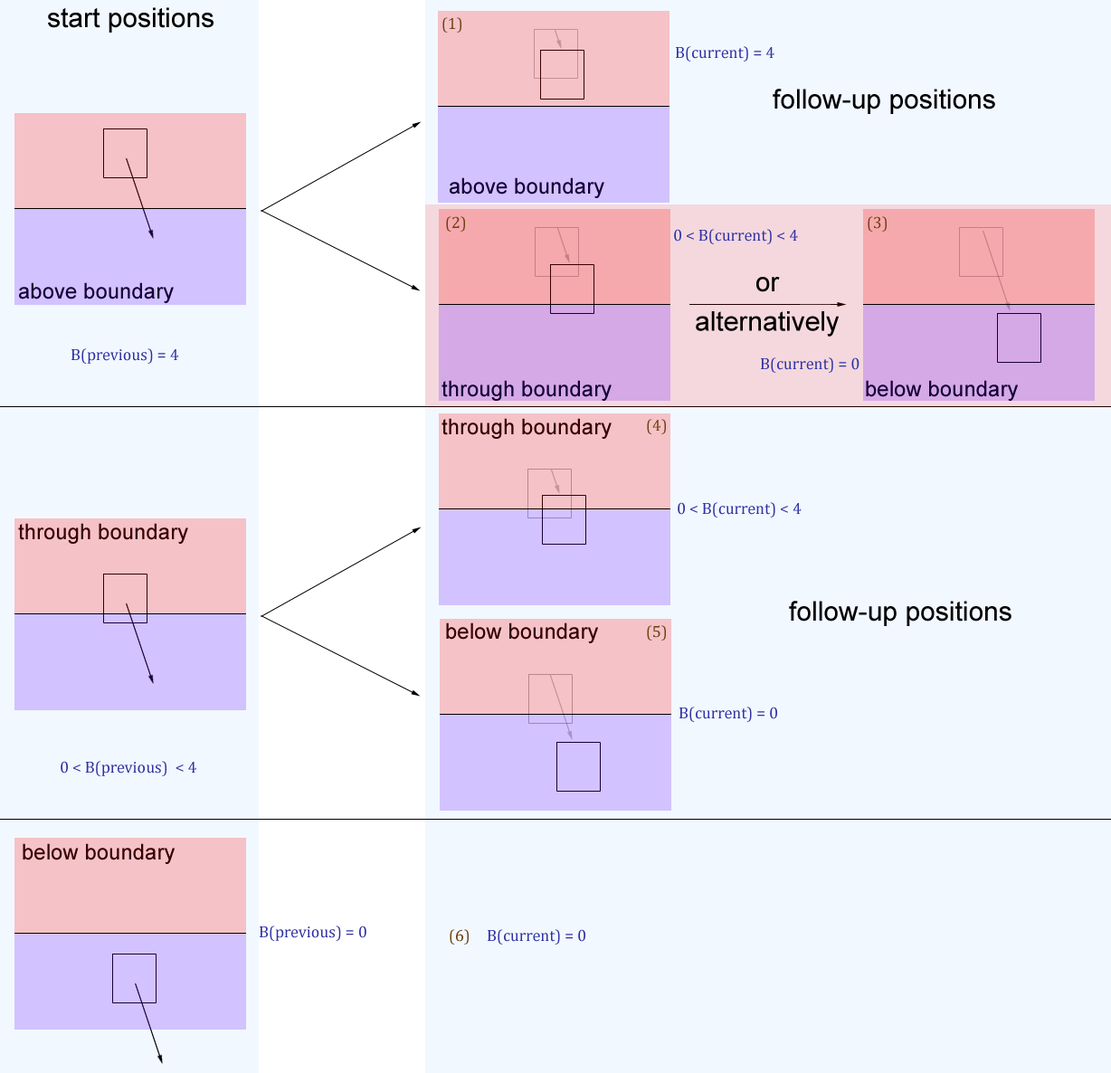
<style>
.page{position:relative;width:1111px;height:1073px;background:#f2f8ff}
.page>*{position:absolute;margin:0}
.t1{font:27.1px "ArialMT";color:#000000}
.t2{font:16.3px "Cambria";color:#6d4111}
.t3{font:16.3px "Cambria";color:#2f32a3}
.t4{font:21.7px "ArialMT";color:#160038}
.t5{font:27.1px/19.7px "ArialMT";color:#000000}
.t6{font:21.7px "ArialMT";color:#380000}
</style>
<div class="page">
<p class="t1" style="left:48px;top:7px;width:166px;height:26px">start positions</p>
<p class="t2" style="left:442px;top:17px;width:19px;height:16px">(1)</p>
<p class="t3" style="left:676px;top:46px;width:99px;height:16px">B(current) = 4</p>
<p class="t1" style="left:773px;top:89px;width:222px;height:25px">follow-up positions</p>
<p class="t4" style="left:450px;top:177px;width:154px;height:21px">above boundary</p>
<p class="t2" style="left:446px;top:216px;width:19px;height:16px">(2)</p>
<p class="t2" style="left:868px;top:216px;width:19px;height:16px">(3)</p>
<p class="t3" style="left:674px;top:229px;width:124px;height:15px">0 &lt; B(current) &lt; 4</p>
<p class="t5" style="left:696px;top:277px;width:143px;height:60px;text-align:center">or<br><br>alternatively</p>
<p class="t4" style="left:19px;top:282px;width:155px;height:21px">above boundary</p>
<p class="t3" style="left:71px;top:348px;width:107px;height:16px">B(previous) = 4</p>
<p class="t3" style="left:761px;top:357px;width:99px;height:16px">B(current) = 0</p>
<p class="t4" style="left:442px;top:380px;width:170px;height:21px">through boundary</p>
<p class="t4" style="left:866px;top:380px;width:152px;height:21px">below boundary</p>
<p class="t6" style="left:442px;top:418px;width:170px;height:21px">through boundary</p>
<p class="t2" style="left:647px;top:419px;width:19px;height:15px">(4)</p>
<p class="t3" style="left:678px;top:502px;width:124px;height:16px">0 &lt; B(current) &lt; 4</p>
<p class="t6" style="left:18px;top:523px;width:170px;height:21px">through boundary</p>
<p class="t1" style="left:789px;top:601px;width:223px;height:25px">follow-up positions</p>
<p class="t6" style="left:446px;top:623px;width:152px;height:20px">below boundary</p>
<p class="t2" style="left:647px;top:625px;width:19px;height:16px">(5)</p>
<p class="t3" style="left:680px;top:707px;width:97px;height:15px">B(current) = 0</p>
<p class="t3" style="left:61px;top:761px;width:135px;height:15px">0 &lt; B(previous)  &lt; 4</p>
<p class="t6" style="left:23px;top:843px;width:152px;height:21px">below boundary</p>
<p class="t3" style="left:260px;top:926px;width:106px;height:15px">B(previous) = 0</p>
<p class="t2" style="left:450px;top:929px;width:19px;height:16px">(6)</p>
<p class="t3" style="left:488px;top:929px;width:97px;height:16px">B(current) = 0</p>
</div>
